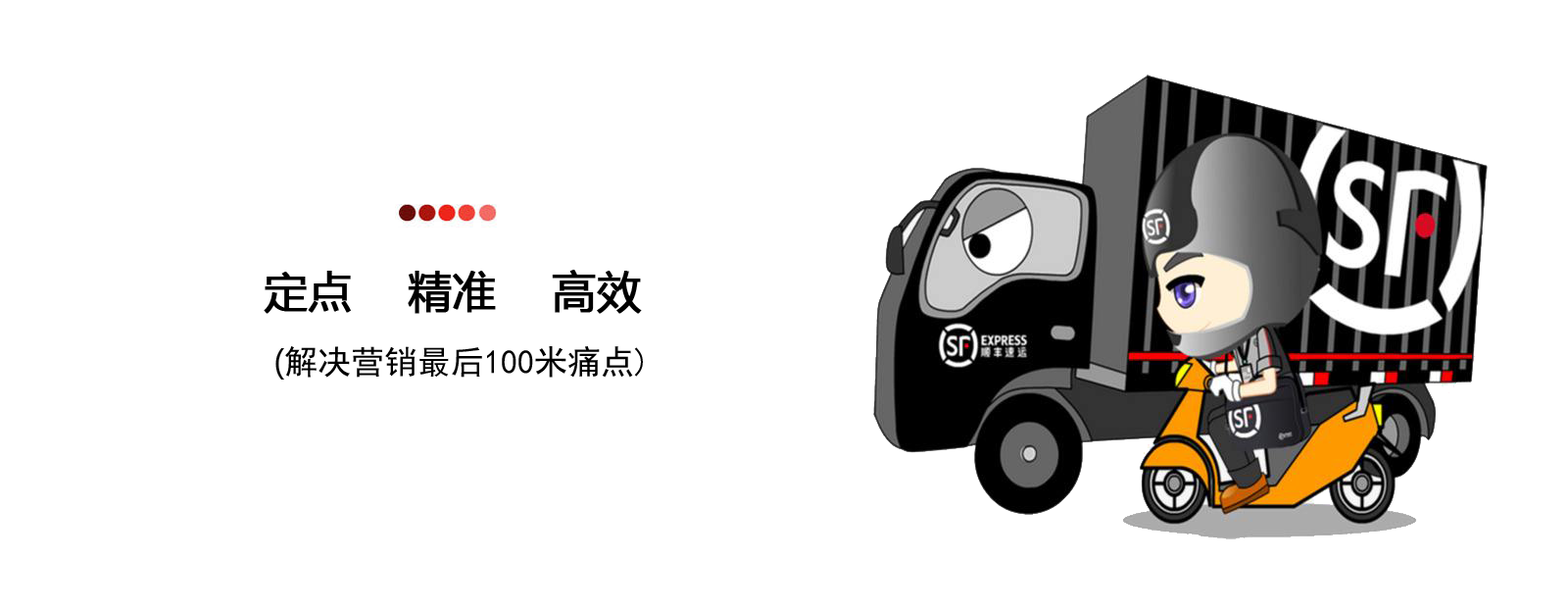
<style>
.page{position:relative;width:1568px;height:612px;background:#ffffff}
.page>*{position:absolute;margin:0}
.t1{font:43.1px "MicrosoftYaHei";color:#000000;font-weight:bold}
.t2{font:33.3px "MicrosoftYaHei";color:#000000}
.t3{font:33.3px "SimHei";color:#000000}
</style>
<div class="page">
<p class="t1" style="left:264px;top:270px;width:379px;height:109px">定点    精准    高效<br><span class="t2"> (</span><span class="t3">解决营销最后100米痛点)</span></p>
</div>
